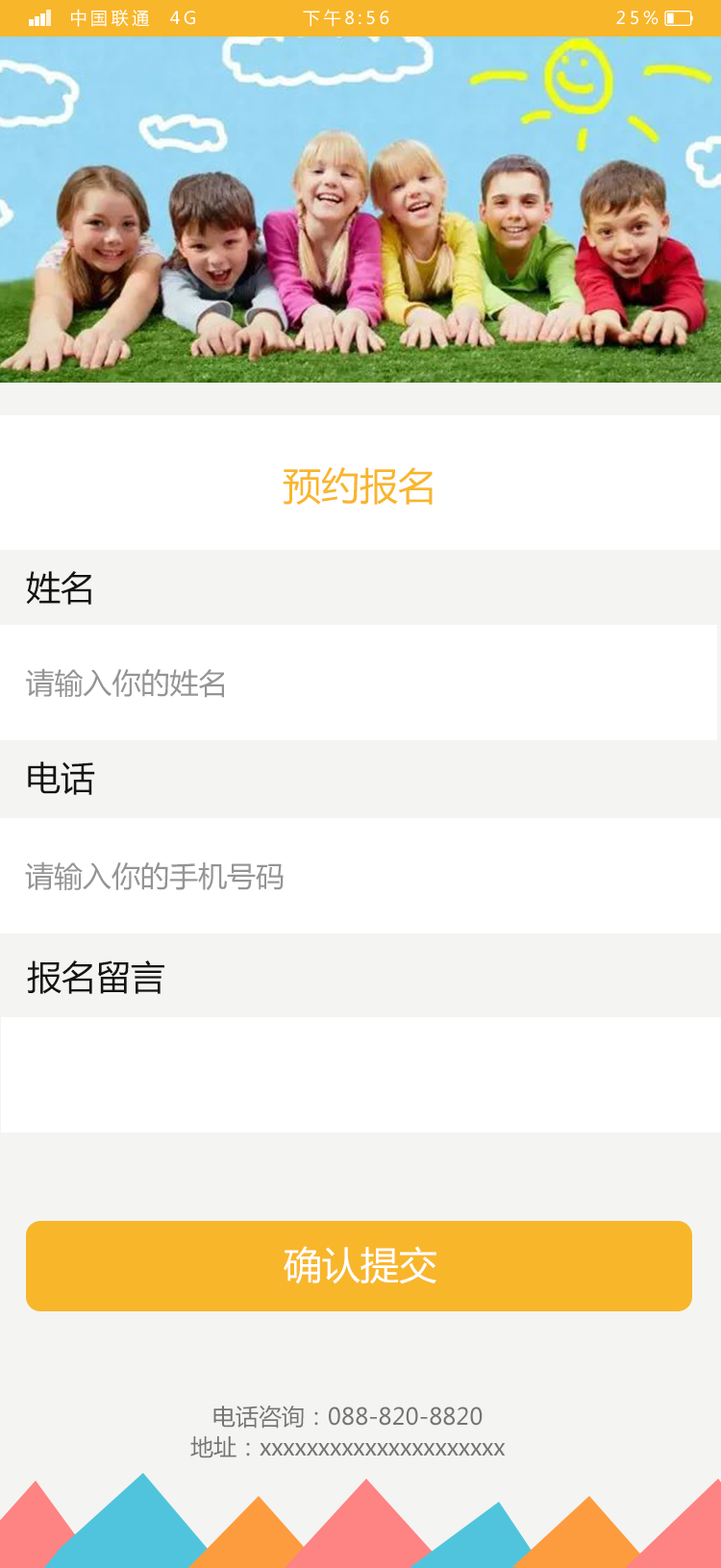
<style>
.page{position:relative;width:721px;height:1568px;background:#f4f4f2}
.page>*{position:absolute;margin:0}
.t1{font:17.3px "MicrosoftYaHei";letter-spacing:0.2em;color:#ffffff}
.t2{font:38.5px "MicrosoftYaHei";color:#f8b62b}
.t3{font:34.6px "MicrosoftYaHei";color:#141414}
.t4{font:28.8px "MicrosoftYaHei";color:#959494}
.t5{font:38.5px "MicrosoftYaHei";color:#fffefe}
.t6{font:23.1px "MicrosoftYaHei";color:#747473}
</style>
<div class="page">
<p class="t1" style="left:71px;top:9px;width:588px;height:18px">中国联通  4G            下午8:56                          25%</p>
<p class="t2" style="left:283px;top:467px;width:150px;height:38px">预约报名</p>
<p class="t3" style="left:26px;top:571px;width:65px;height:34px">姓名</p>
<p class="t4" style="left:26px;top:668px;width:198px;height:30px">请输入你的姓名</p>
<p class="t3" style="left:28px;top:761px;width:67px;height:34px">电话</p>
<p class="t4" style="left:25px;top:861px;width:259px;height:29px">请输入你的手机号码</p>
<p class="t3" style="left:27px;top:960px;width:137px;height:34px">报名留言</p>
<p class="t5" style="left:284px;top:1246px;width:152px;height:38px">确认提交</p>
<p class="t6" style="left:213px;top:1406px;width:270px;height:23px">电话咨询：088-820-8820</p>
<p class="t6" style="left:190px;top:1436px;width:316px;height:22px">地址：xxxxxxxxxxxxxxxxxxxxx</p>
</div>
